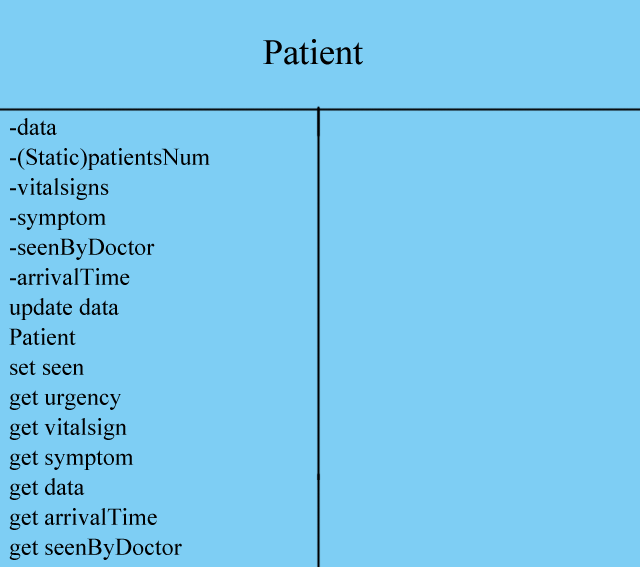
<style>
.page{position:relative;width:640px;height:567px;background:#7ecef4}
.page>*{position:absolute;margin:0}
.t1{font:36px "TimesNewRomanPSMT";color:#000000}
.t2{font:24px/30px "TimesNewRomanPSMT";color:#000000}
</style>
<div class="page">
<p class="t1" style="left:263px;top:39px;width:100px;height:26px">Patient</p>
<p class="t2" style="left:9px;top:118px;width:201px;height:442px">-data<br>-(Static)patientsNum<br>-vitalsigns<br>-symptom<br>-seenByDoctor<br>-arrivalTime<br>update data<br>Patient<br>set seen<br>get urgency<br>get vitalsign<br>get symptom<br>get data<br>get arrivalTime<br>get seenByDoctor</p>
</div>
